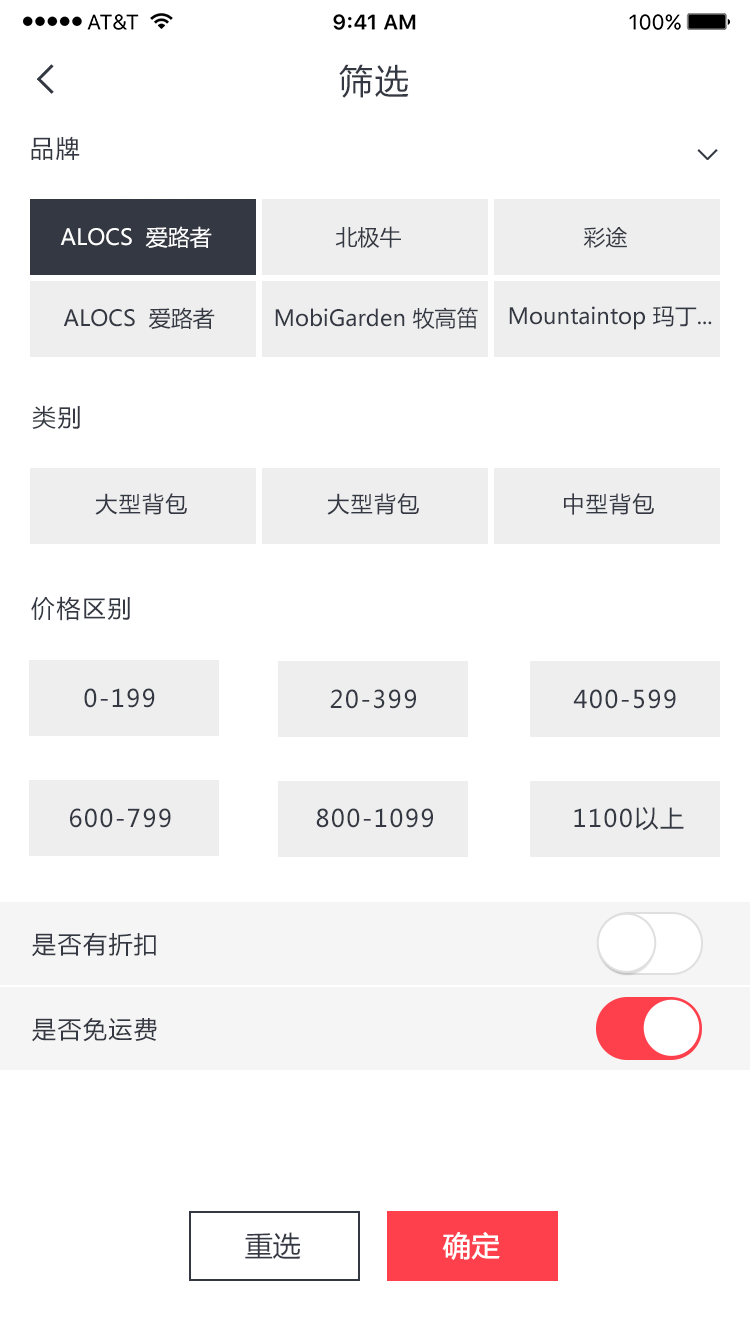
<style>
.page{position:relative;width:750px;height:1334px;background:#ffffff}
.page>*{position:absolute;margin:0}
.t1{font:34px "MicrosoftYaHei";letter-spacing:0.06em;color:#343843}
.t2{font:24px "MicrosoftYaHei";letter-spacing:0.06em;color:#343843}
.t3{font:22px "MicrosoftYaHei";color:#ffffff}
.t4{font:22px "MicrosoftYaHei";color:#343843}
.t5{font:22px "MicrosoftYaHei";letter-spacing:0.06em;color:#343843}
.t6{font:28px "MicrosoftYaHei";color:#343843}
.t7{font:28px "MicrosoftYaHei";color:#ffffff;font-weight:bold}
</style>
<div class="page">
<p class="t1" style="left:339px;top:64px;width:70px;height:34px">筛选</p>
<p class="t2" style="left:31px;top:136px;width:49px;height:25px">品牌</p>
<p class="t3" style="left:60px;top:226px;width:152px;height:22px">ALOCS  爱路者</p>
<p class="t4" style="left:335px;top:226px;width:66px;height:22px">北极牛</p>
<p class="t4" style="left:583px;top:227px;width:45px;height:21px">彩途</p>
<p class="t4" style="left:63px;top:307px;width:152px;height:22px">ALOCS  爱路者</p>
<p class="t4" style="left:275px;top:307px;width:203px;height:22px">MobiGarden 牧高笛</p>
<p class="t4" style="left:509px;top:306px;width:203px;height:24px">Mountaintop 玛丁...</p>
<p class="t2" style="left:32px;top:405px;width:48px;height:24px">类别</p>
<p class="t5" style="left:95px;top:493px;width:92px;height:22px">大型背包</p>
<p class="t5" style="left:327px;top:493px;width:92px;height:22px">大型背包</p>
<p class="t5" style="left:564px;top:493px;width:90px;height:22px">中型背包</p>
<p class="t2" style="left:31px;top:596px;width:99px;height:25px">价格区别</p>
<p class="t2" style="left:84px;top:688px;width:71px;height:20px">0-199</p>
<p class="t2" style="left:330px;top:689px;width:86px;height:20px">20-399</p>
<p class="t2" style="left:573px;top:689px;width:103px;height:20px">400-599</p>
<p class="t2" style="left:70px;top:808px;width:101px;height:20px">600-799</p>
<p class="t2" style="left:316px;top:808px;width:117px;height:20px">800-1099</p>
<p class="t2" style="left:574px;top:807px;width:110px;height:24px">1100以上</p>
<p class="t2" style="left:32px;top:932px;width:124px;height:25px">是否有折扣</p>
<p class="t2" style="left:32px;top:1017px;width:125px;height:25px">是否免运费</p>
<p class="t6" style="left:245px;top:1232px;width:56px;height:27px">重选</p>
<p class="t7" style="left:442px;top:1232px;width:58px;height:28px">确定</p>
</div>
